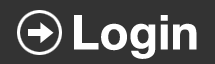
<style>
.page{position:relative;width:215px;height:64px;background:#333333}
.page>*{position:absolute;margin:0}
.t1{font:48px "HelveticaNeue-Bold";color:#ffffff}
</style>
<div class="page">
<p class="t1" style="left:74px;top:15px;width:123px;height:44px">Login</p>
</div>
